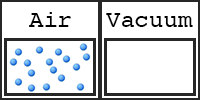
<style>
.page{position:relative;width:200px;height:100px;background:#ffffff}
.page>*{position:absolute;margin:0}
.t1{font:24px "Courier";color:#000000}
</style>
<div class="page">
<p class="t1" style="left:29px;top:12px;width:42px;height:15px">Air</p>
<p class="t1" style="left:106px;top:13px;width:87px;height:14px">Vacuum</p>
</div>
